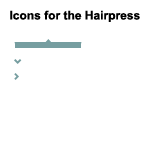
<style>
.page{position:relative;width:150px;height:150px;background:#ffffff}
.page>*{position:absolute;margin:0}
.t1{font:12px "Arial-BoldMT";color:#000000}
</style>
<div class="page">
<p class="t1" style="left:10px;top:10px;width:130px;height:12px">Icons for the Hairpress</p>
</div>
